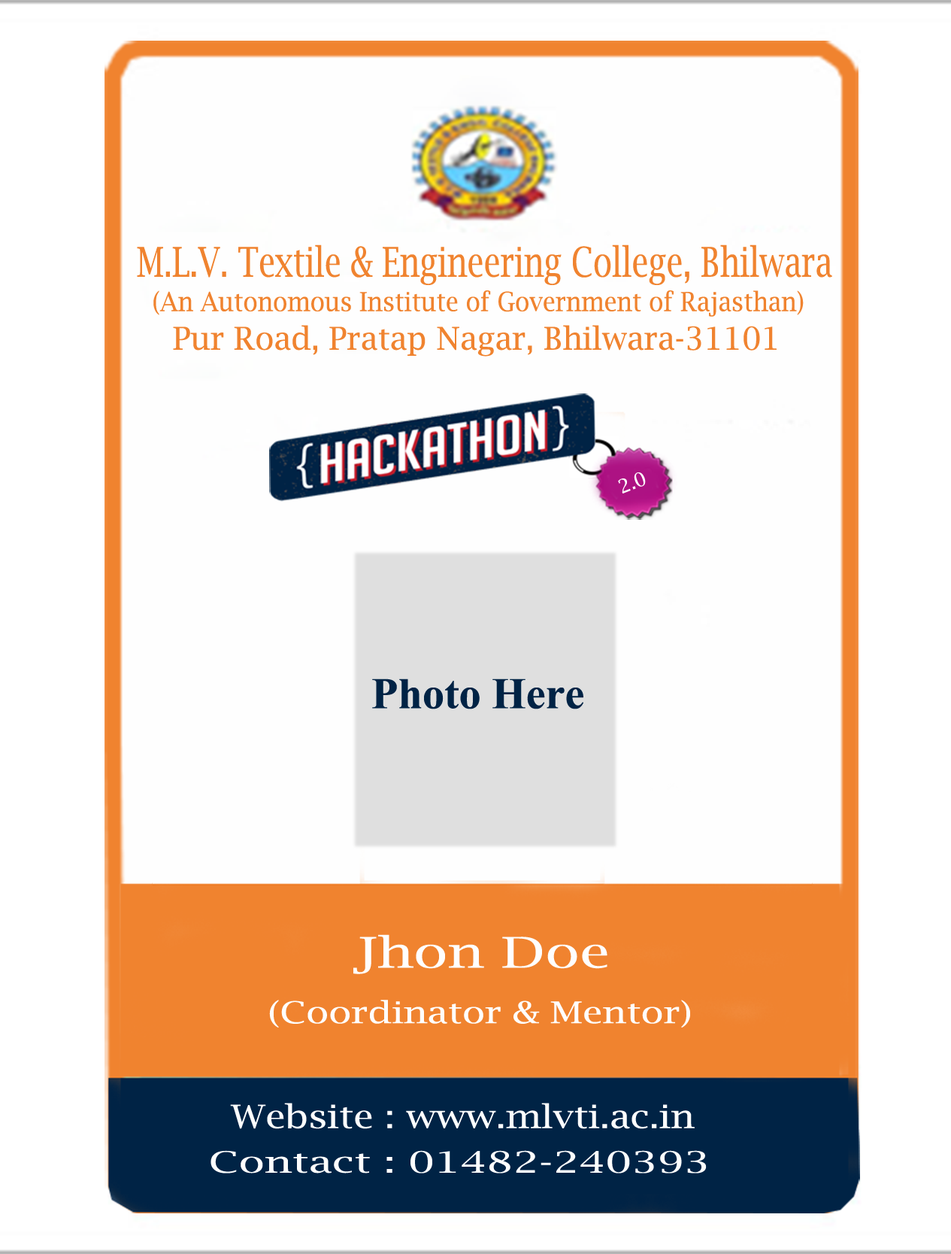
<style>
.page{position:relative;width:951px;height:1254px;background:#fefefe}
.page>*{position:absolute;margin:0}
.t1{font:40.9px "LucidaBright";color:#f0832f;scale:0.77 1}
.t2{font:26.3px "LucidaBright";color:#f0832f;scale:0.92 1}
.t3{font:31.3px "LucidaBright";color:#f0832f}
.t4{font:18.9px "LucidaBright";color:#fefefe}
.t5{font:43.9px "TimesNewRomanPS-BoldMT";color:#002345}
.t6{font:42.4px "LucidaBright";color:#fefefe;scale:1.35 1}
.t7{font:30px "LucidaBright";color:#fefefe;scale:1.25 1}
.t8{font:32.1px "LucidaBright";color:#fefefe;scale:1.17 1}
.t9{font:29.2px "LucidaBright";color:#fefefe;scale:1.47 1}
</style>
<div class="page">
<p class="t1" style="left:137px;top:244px;width:695px;height:41px">M.L.V. Textile &amp; Engineering College, Bhilwara</p>
<p class="t2" style="left:153px;top:290px;width:651px;height:27px">(An Autonomous Institute of Government of Rajasthan)</p>
<p class="t3" style="left:173px;top:325px;width:604px;height:31px">Pur Road, Pratap Nagar, Bhilwara-31101</p>
<p class="t4" style="left:618px;top:472px;width:28px;height:21px;rotate:-21deg">2.0</p>
<p class="t5" style="left:372px;top:678px;width:212px;height:31px">Photo Here</p>
<p class="t6" style="left:353px;top:934px;width:255px;height:40px">Jhon Doe</p>
<p class="t7" style="left:269px;top:999px;width:421px;height:28px">(Coordinator &amp; Mentor)</p>
<p class="t8" style="left:230px;top:1102px;width:465px;height:27px">Website : www.mlvti.ac.in</p>
<p class="t9" style="left:211px;top:1150px;width:496px;height:23px">Contact : 01482-240393</p>
</div>
